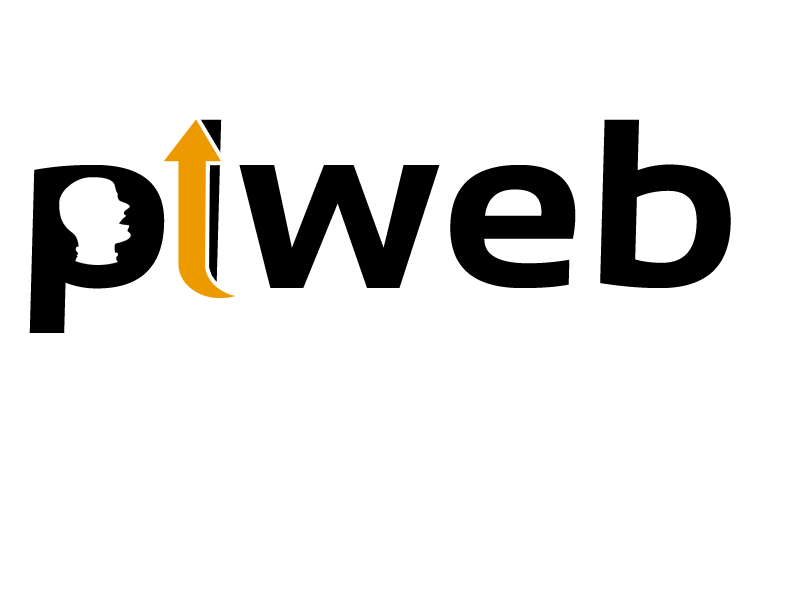
<style>
.page{position:relative;width:800px;height:600px;background:#ffffff}
.page>*{position:absolute;margin:0}
.t1{font:240px "Sansation-Bold";letter-spacing:0.01em;color:#000000;scale:1.1 1}
.t2{font:240px "Sansation-Bold";letter-spacing:0.01em;color:#000000;scale:0.95 1}
</style>
<div class="page">
<p class="t1" style="left:29px;top:119px;width:702px;height:214px">p<span class="t2">l</span>web</p>
</div>
